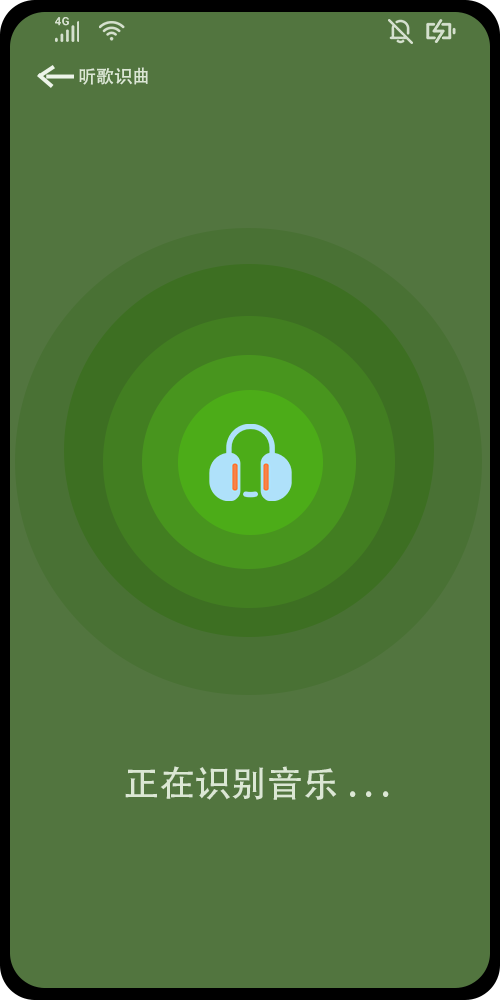
<style>
.page{position:relative;width:500px;height:1000px;background:#52753f}
.page>*{position:absolute;margin:0}
.t1{font:18px "AdobeHeitiStd-Regular";color:#dbe7d4}
.t2{font:36px "AdobeHeitiStd-Regular";color:#dbe7d4}
</style>
<div class="page">
<p class="t1" style="left:79px;top:67px;width:69px;height:18px">听歌识曲</p>
<p class="t2" style="left:125px;top:766px;width:264px;height:34px">正在识别音乐. . .</p>
</div>
